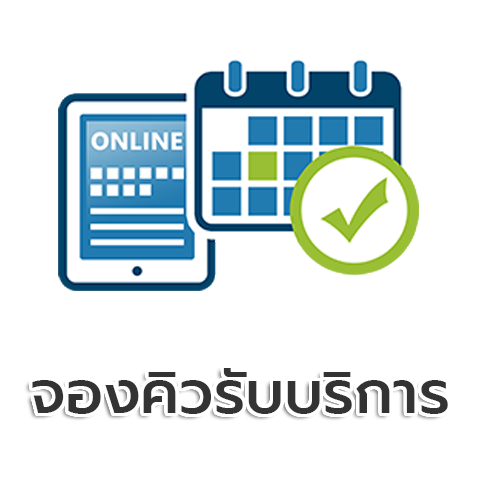
<style>
.page{position:relative;width:480px;height:480px;background:#ffffff}
.page>*{position:absolute;margin:0}
.t1{font:60px "Prompt-Medium";color:#333333}
</style>
<div class="page">
<p class="t1" style="left:32px;top:368px;width:416px;height:46px">จองคิวรับบริการ</p>
</div>
